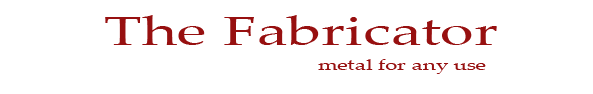
<style>
.page{position:relative;width:593px;height:94px;background:#ffffff}
.page>*{position:absolute;margin:0}
.t1{font:41.2px "PalatinoLinotype-Roman";color:#971010;scale:1.49 1}
.t2{font:15.6px "PalatinoLinotype-Roman";color:#971010;scale:1.42 1}
</style>
<div class="page">
<p class="t1" style="left:105px;top:15px;width:392px;height:30px">The Fabricator</p>
<p class="t2" style="left:318px;top:59px;width:168px;height:15px">metal for any use</p>
</div>
